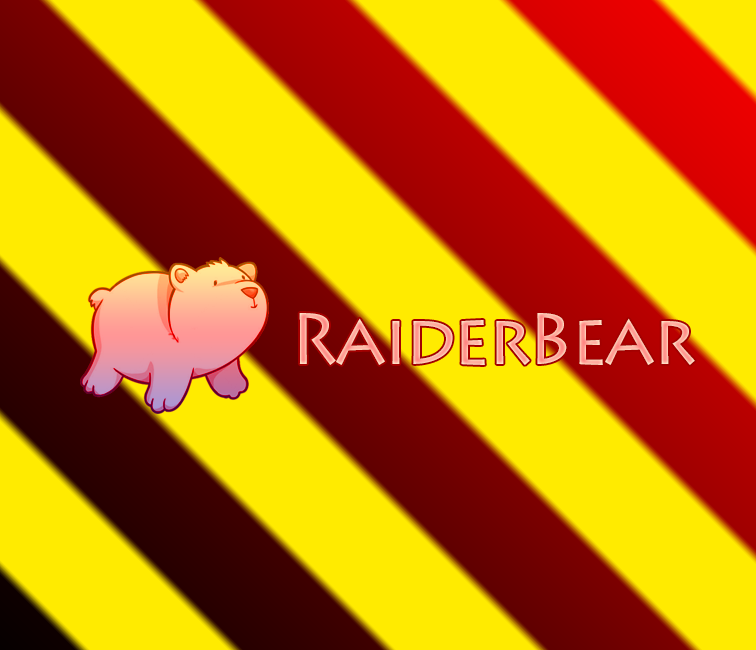
<style>
.page{position:relative;width:756px;height:650px;background:#ffeb00}
.page>*{position:absolute;margin:0}
.t1{font:72px "LithosPro-Regular";letter-spacing:-0.05em}
</style>
<div class="page">
<p class="t1" style="left:299px;top:313px;width:396px;height:52px">RaiderBear</p>
</div>
